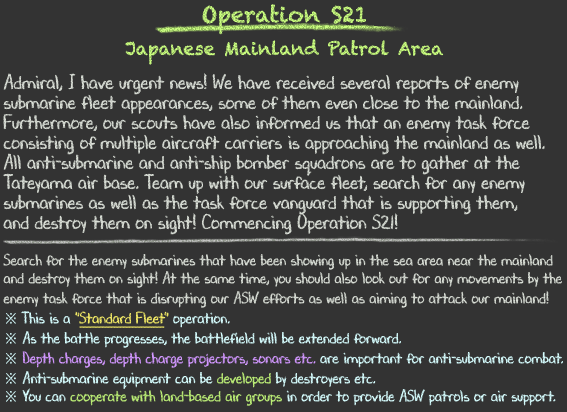
<style>
.page{position:relative;width:567px;height:412px;background:#333333}
.page>*{position:absolute;margin:0}
.t1{font:18px/36px "Chalkduster"}
.t2{font:22px/36px "Chalkduster"}
.t3{font:20px/20px "DJBChalkItUp";color:#d9ded6;scale:0.9 1}
.t4{font:16px/18px "DJBChalkItUp";color:#d9ded6;scale:0.9 1}
.t5{font:16px/20px "DJBChalkItUp";color:#d9ded6;scale:0.9 1}
.t6{font:16px/20px "TimesNewRomanPSMT";color:#d7feff;scale:0.9 1}
.t7{font:16px/20px "DJBChalkItUp";color:#d7feff;scale:0.9 1}
.t8{font:16px/20px "DJBChalkItUp";color:#f5ed68;scale:0.9 1}
.t9{font:16px/20px "DJBChalkItUp";color:#f5ed68;text-decoration:underline;scale:0.9 1}
.t10{font:16px/18px "TimesNewRomanPSMT";color:#d7feff;scale:0.9 1}
.t11{font:16px/18px "DJBChalkItUp";color:#d298ff;scale:0.9 1}
.t12{font:16px/18px "DJBChalkItUp";color:#d7feff;scale:0.9 1}
.t13{font:16px/18px "DJBChalkItUp";color:#bdef78;scale:0.9 1}
</style>
<div class="page">
<p class="t1" style="left:125px;top:4px;width:319px;height:61px;text-align:center"><span class="t2">Operation S21<br></span>Japanese Mainland Patrol Area</p>
<p class="t3" style="left:3px;top:73px;width:560px;height:333px">Admiral, I have urgent news! We have received several reports of enemy<br>submarine fleet appearances, some of them even close to the mainland.<br>Furthermore, our scouts have also informed us that an enemy task force<br>consisting of multiple aircraft carriers is approaching the mainland as well.<br>All anti-submarine and anti-ship bomber squadrons are to gather at the<br>Tateyama air base. Team up with our surface fleet, search for any enemy<br>submarines as well as the task force vanguard that is supporting them,<br>and destroy them on sight! Commencing Operation S21!<br><br><span class="t4">Search for the enemy submarines that have been showing up in the sea area near the mainland<br>and destroy them on sight! </span><span class="t5">At the same time, you should also look out for any movements by the<br>enemy task force that is disrupting our ASW efforts as well as aiming to attack our mainland!<br></span><span class="t6">※ </span><span class="t7">This is a </span><span class="t8">"</span><span class="t9">Standard Fleet</span><span class="t8">"</span><span class="t7"> operation.<br></span><span class="t6">※</span><span class="t7"> As the battle progresses, the battlefield will be extended forward.<br></span><span class="t10">※ </span><span class="t11">Depth charges, depth charge projectors, sonars etc.</span><span class="t12"> are important for </span><span class="t7">anti-submarine combat.<br></span><span class="t10">※</span><span class="t12"> Anti-submarine equipment can be </span><span class="t13">developed</span><span class="t12"> by destroyers etc.<br></span><span class="t10">※</span><span class="t12"> You can </span><span class="t13">cooperate with land-based air groups</span><span class="t12"> in order to provide ASW patrols or air support.</span></p>
</div>
